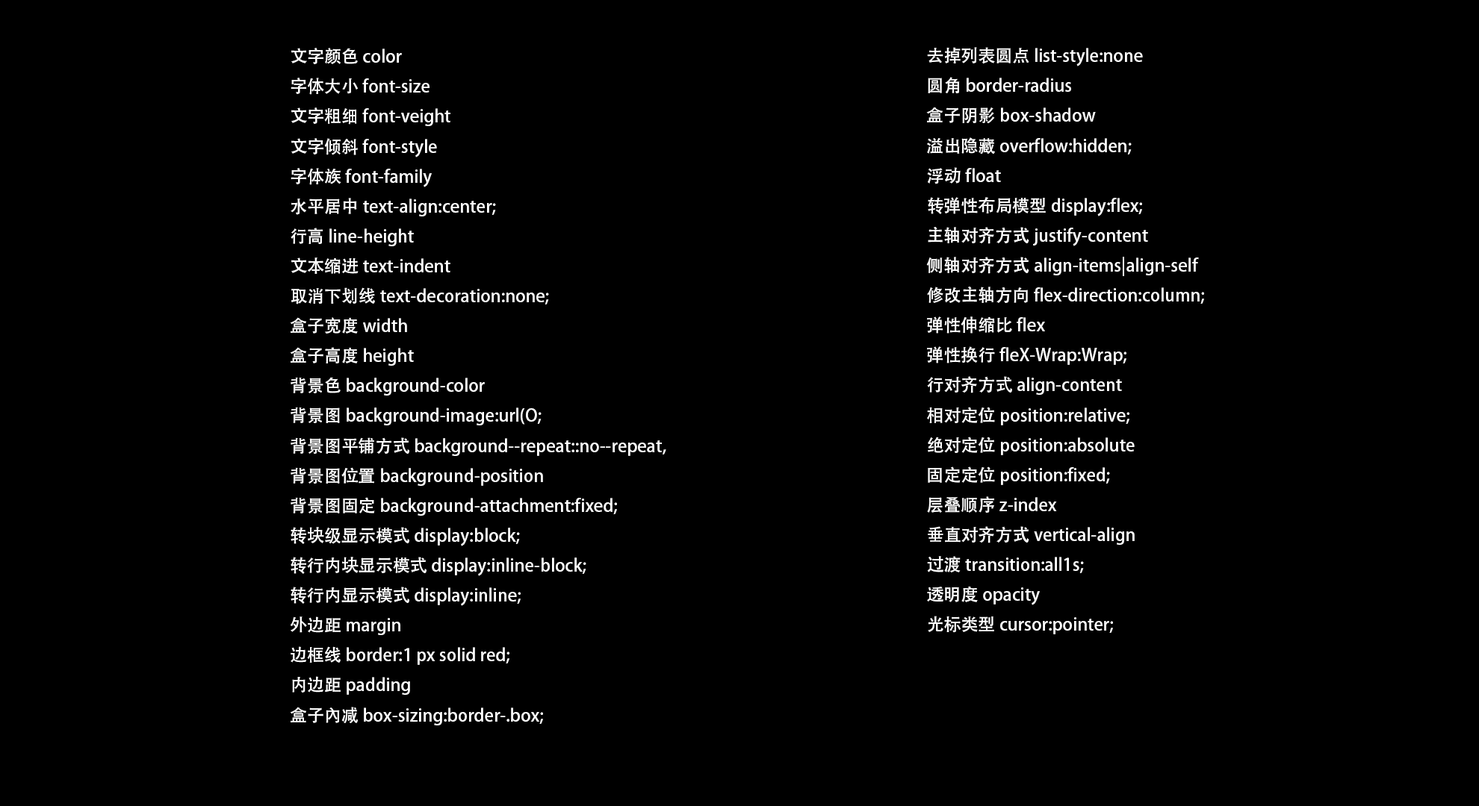
<style>
.page{position:relative;width:1479px;height:806px;background:#000000}
.page>*{position:absolute;margin:0}
.t1{font:17.1px "AdobeHeitiStd-Regular";color:#ffffff}
</style>
<div class="page">
<p class="t1" style="left:290px;top:48px;width:376px;height:678px">文字颜色color<br>字体大小font-size<br>文字粗细font-veight<br>文字倾斜font-style<br>字体族font-family<br>水平居中text-align:center;<br>行高line-height<br>文本缩进text-indent<br>取消下划线text-decoration:none;<br>盒子宽度width<br>盒子高度height<br>背景色background-color<br>背景图background-image:url(O;<br>背景图平铺方式background--repeat::no--repeat,<br>背景图位置background-position<br>背景图固定background-attachment:fixed;<br>转块级显示模式display:block;<br>转行内块显示模式display:inline-block;<br>转行内显示模式display:inline;<br>外边距margin<br>边框线border:1 px solid red;<br>内边距padding<br>盒子內减box-sizing:border-.box;</p>
<p class="t1" style="left:926px;top:47px;width:278px;height:588px">去掉列表圆点list-style:none<br>圆角border-radius<br>盒子阴影box-shadow<br>溢出隐藏overflow:hidden;<br>浮动float<br>转弹性布局模型display:flex;<br>主轴对齐方式justify-content<br>侧轴对齐方式align-items|align-self<br>修改主轴方向flex-direction:column;<br>弹性伸缩比flex<br>弹性换行fleX-Wrap:Wrap;<br>行对齐方式align-content<br>相对定位position:relative;<br>绝对定位position:absolute<br>固定定位position:fixed;<br>层叠顺序z-index<br>垂直对齐方式vertical-align<br>过渡transition:all1s;<br>透明度opacity<br>光标类型cursor:pointer;</p>
</div>
